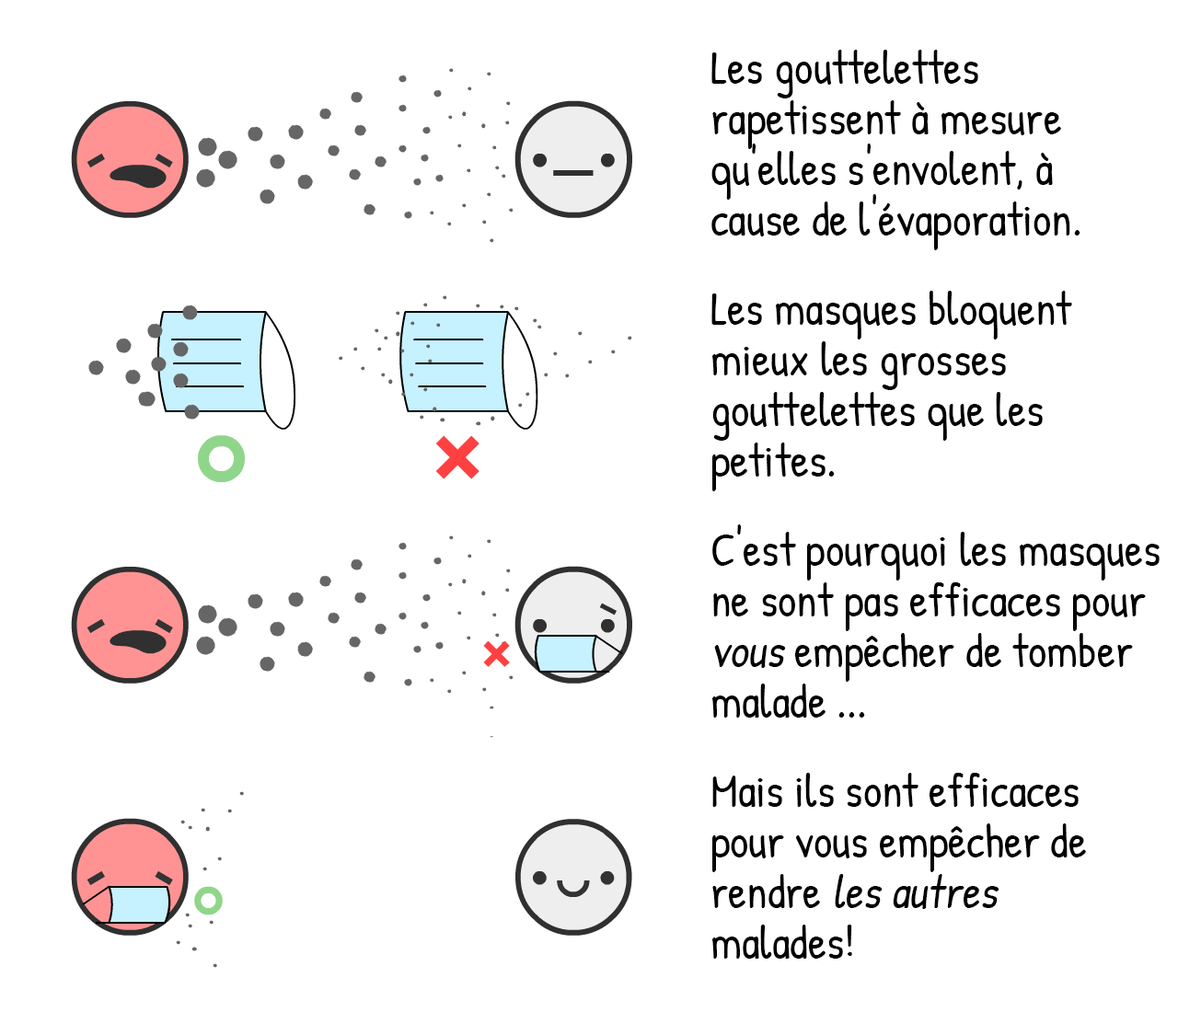
<style>
.page{position:relative;width:1178px;height:1012px;background:#ffffff}
.page>*{position:absolute;margin:0}
.t1{font:46px/50.6px "PatrickHand-Regular";color:#000000}
.t2{font:46px/50.6px "PatrickHand-Regular";color:#000000;font-style:italic}
</style>
<div class="page">
<p class="t1" style="left:711px;top:50px;width:369px;height:200px">Les gouttelettes rapetissent à mesure qu'elles s'envolent, à cause de l'évaporation.</p>
<p class="t1" style="left:711px;top:291px;width:361px;height:200px">Les masques bloquent mieux les grosses gouttelettes que les petites.</p>
<p class="t1" style="left:712px;top:525px;width:448px;height:193px">C'est pourquoi les masques ne sont pas efficaces pour <span class="t2">vous</span> empêcher de tomber malade ...</p>
<p class="t1" style="left:712px;top:773px;width:374px;height:186px">Mais ils sont efficaces pour vous empêcher de rendre <span class="t2">les autres</span> malades!</p>
</div>
